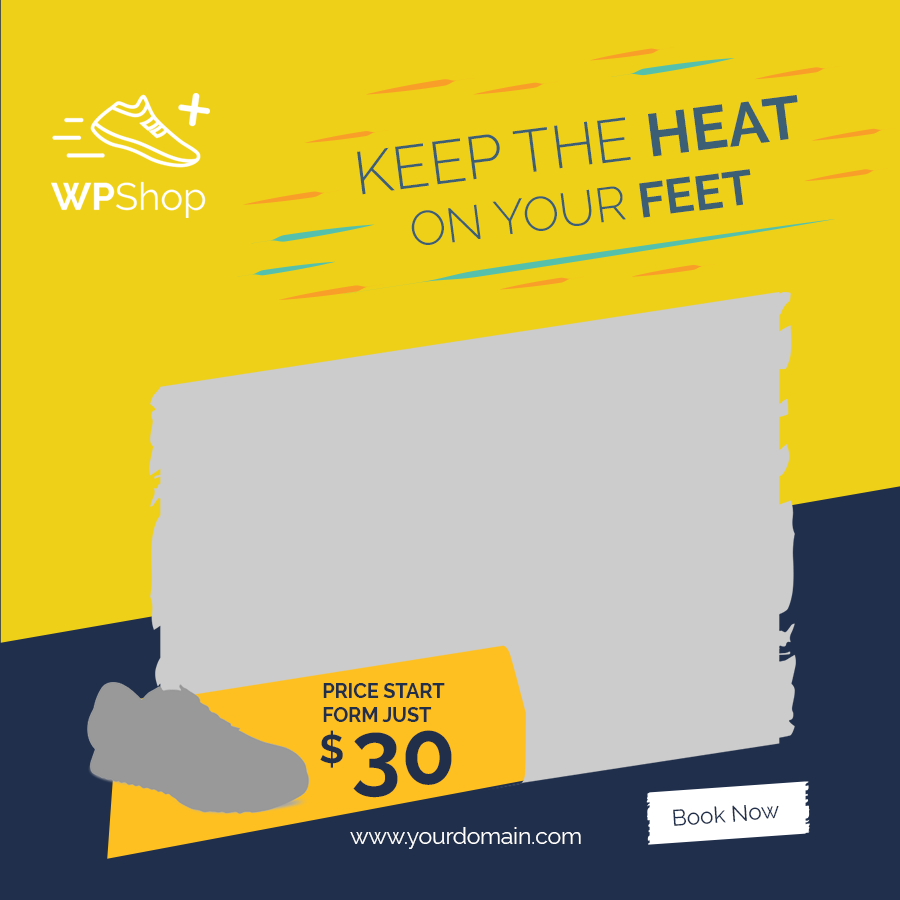
<style>
.page{position:relative;width:900px;height:900px;background:#eed018}
.page>*{position:absolute;margin:0}
.t1{font:60.2px "Raleway-Light";color:#3c5f75}
.t2{font:60.2px "Raleway-Bold";color:#3c5f75}
.t3{font:48.5px "Raleway-Light";color:#3c5f75}
.t4{font:48.5px "Raleway-Bold";color:#3c5f75}
.t5{font:19.7px "Raleway-Bold";color:#212f4b}
.t6{font:40.1px "Raleway-Bold";color:#212f4b}
.t7{font:89.5px "Raleway-Bold";color:#212f4b}
.t8{font:22.5px "Raleway-Regular";color:#202f4b}
.t9{font:22.5px "Raleway-Regular";color:#ffffff}
</style>
<div class="page">
<p class="t1" style="left:357px;top:95px;width:441px;height:100px;rotate:-7deg">KEEP THE <span class="t2">HEAT</span></p>
<p class="t3" style="left:411px;top:169px;width:340px;height:76px;rotate:-7deg">ON YOUR<span class="t4"> FEET</span></p>
<p class="t5" style="left:323px;top:683px;width:122px;height:39px">PRICE START<br>FORM JUST</p>
<p class="t6" style="left:320px;top:730px;width:23px;height:38px">$</p>
<p class="t7" style="left:353px;top:730px;width:99px;height:68px">30</p>
<p class="t8" style="left:673px;top:805px;width:106px;height:21px;rotate:-4deg">Book Now</p>
<p class="t9" style="left:350px;top:827px;width:231px;height:22px">www.yourdomain.com</p>
</div>
